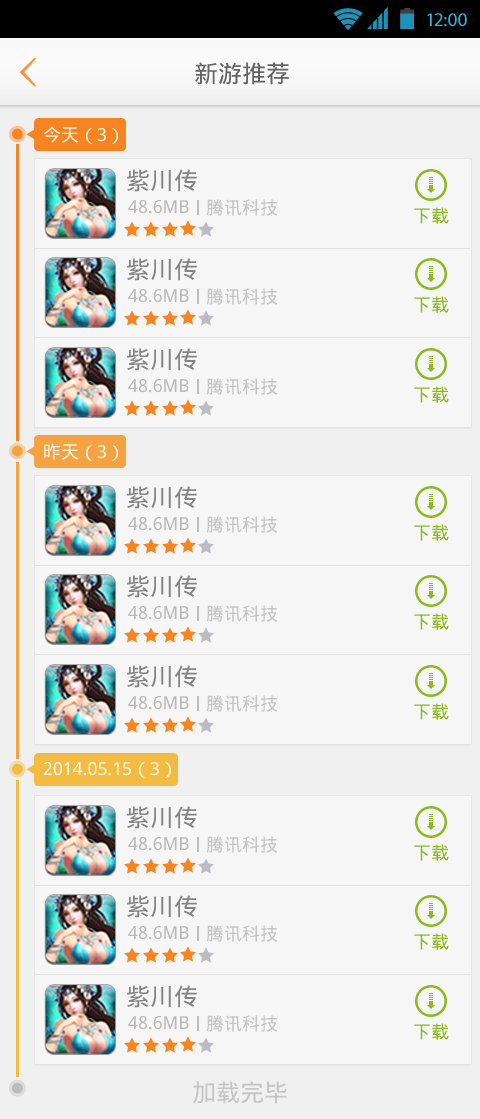
<style>
.page{position:relative;width:480px;height:1119px;background:#f6f6f6}
.page>*{position:absolute;margin:0}
.t1{font:19.4px "MyriadPro-Regular";color:#33b5e5}
.t2{font:24px "DroidSansFallback";color:#646464}
.t3{font:18px "DroidSansFallback";color:#fefefe}
.t4{font:24px "DroidSansFallback";color:#858484}
.t5{font:18px "DroidSansFallback";color:#b9b9b9}
.t6{font:18px "DroidSansFallback";color:#c4c4c4}
.t7{font:18px "DroidSansFallback";color:#89bb1c}
.t8{font:24px "DroidSansFallback";color:#c4c4c4}
</style>
<div class="page">
<p class="t1" style="left:427px;top:13px;width:40px;height:14px">12:00</p>
<p class="t2" style="left:195px;top:62px;width:94px;height:23px">新游推荐</p>
<p class="t3" style="left:43px;top:126px;width:75px;height:18px;opacity:0.9">今天（3）</p>
<p class="t4" style="left:127px;top:169px;width:70px;height:23px">紫川传</p>
<p class="t5" style="left:128px;top:200px;width:61px;height:14px">48.6MB</p>
<p class="t6" style="left:207px;top:199px;width:71px;height:17px">腾讯科技</p>
<p class="t7" style="left:414px;top:207px;width:35px;height:17px">下载</p>
<p class="t4" style="left:127px;top:258px;width:70px;height:23px">紫川传</p>
<p class="t5" style="left:128px;top:289px;width:61px;height:14px">48.6MB</p>
<p class="t6" style="left:207px;top:288px;width:71px;height:17px">腾讯科技</p>
<p class="t7" style="left:414px;top:296px;width:35px;height:17px">下载</p>
<p class="t4" style="left:127px;top:348px;width:70px;height:23px">紫川传</p>
<p class="t5" style="left:128px;top:379px;width:61px;height:14px">48.6MB</p>
<p class="t6" style="left:207px;top:378px;width:71px;height:17px">腾讯科技</p>
<p class="t7" style="left:414px;top:386px;width:35px;height:17px">下载</p>
<p class="t3" style="left:44px;top:443px;width:74px;height:18px;opacity:0.9">昨天（3）</p>
<p class="t4" style="left:127px;top:486px;width:70px;height:23px">紫川传</p>
<p class="t5" style="left:128px;top:517px;width:61px;height:14px">48.6MB</p>
<p class="t6" style="left:207px;top:516px;width:71px;height:17px">腾讯科技</p>
<p class="t7" style="left:414px;top:524px;width:35px;height:17px">下载</p>
<p class="t4" style="left:127px;top:575px;width:70px;height:23px">紫川传</p>
<p class="t5" style="left:128px;top:606px;width:61px;height:14px">48.6MB</p>
<p class="t6" style="left:207px;top:605px;width:71px;height:17px">腾讯科技</p>
<p class="t7" style="left:414px;top:613px;width:35px;height:17px">下载</p>
<p class="t4" style="left:127px;top:665px;width:70px;height:23px">紫川传</p>
<p class="t5" style="left:128px;top:696px;width:61px;height:14px">48.6MB</p>
<p class="t6" style="left:207px;top:695px;width:71px;height:17px">腾讯科技</p>
<p class="t7" style="left:414px;top:703px;width:35px;height:17px">下载</p>
<p class="t3" style="left:43px;top:762px;width:128px;height:16px;opacity:0.9">2014.05.15（3）</p>
<p class="t4" style="left:127px;top:806px;width:70px;height:23px">紫川传</p>
<p class="t5" style="left:128px;top:837px;width:61px;height:14px">48.6MB</p>
<p class="t6" style="left:207px;top:836px;width:71px;height:17px">腾讯科技</p>
<p class="t7" style="left:414px;top:844px;width:35px;height:17px">下载</p>
<p class="t4" style="left:127px;top:895px;width:70px;height:23px">紫川传</p>
<p class="t5" style="left:128px;top:926px;width:61px;height:14px">48.6MB</p>
<p class="t6" style="left:207px;top:925px;width:71px;height:17px">腾讯科技</p>
<p class="t7" style="left:414px;top:933px;width:35px;height:17px">下载</p>
<p class="t4" style="left:127px;top:985px;width:70px;height:23px">紫川传</p>
<p class="t5" style="left:128px;top:1016px;width:61px;height:14px">48.6MB</p>
<p class="t6" style="left:207px;top:1015px;width:71px;height:17px">腾讯科技</p>
<p class="t7" style="left:414px;top:1023px;width:35px;height:17px">下载</p>
<p class="t8" style="left:193px;top:1081px;width:94px;height:23px">加载完毕</p>
</div>
